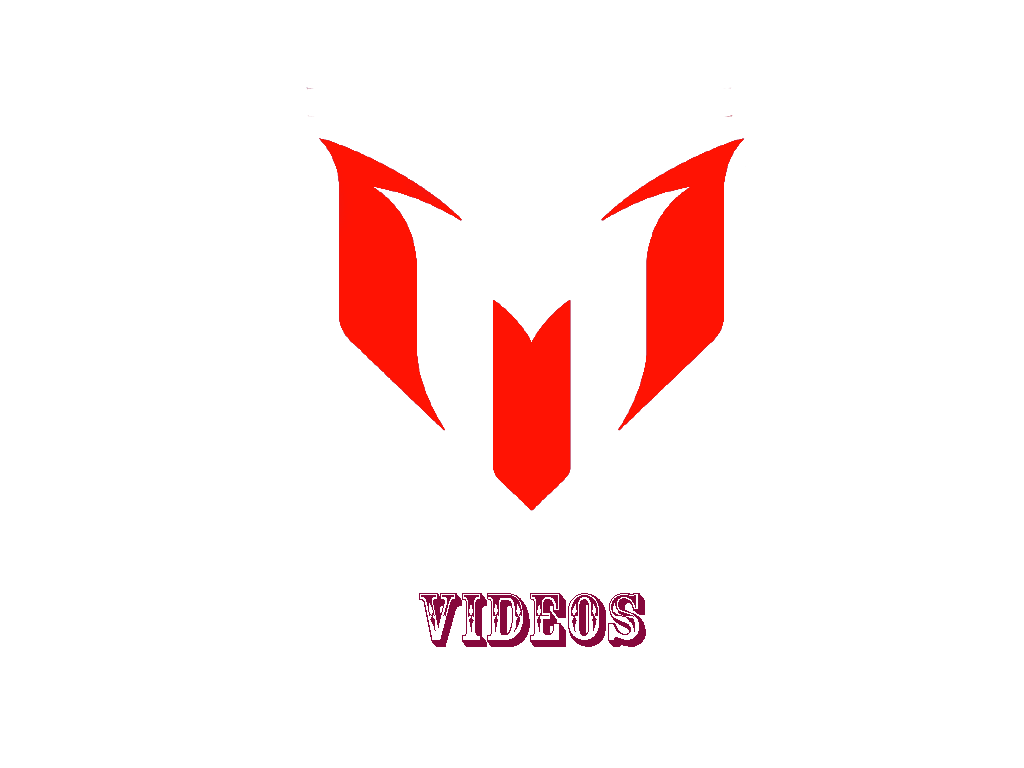
<style>
.page{position:relative;width:1024px;height:768px;background:#ffffff}
.page>*{position:absolute;margin:0}
.t1{font:72px "RosewoodStd-Regular";color:#86083c}
</style>
<div class="page">
<p class="t1" style="left:419px;top:593px;width:227px;height:54px">VIDEOS</p>
</div>
